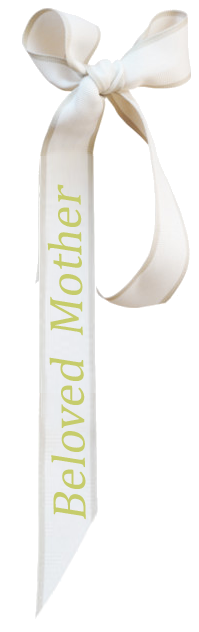
<style>
.page{position:relative;width:199px;height:632px;background:#ffffff}
.page>*{position:absolute;margin:0}
.t1{font:47.8px "CambriaMath";color:#c6cc6b;font-style:italic}
</style>
<div class="page">
<p class="t1" style="left:47px;top:184px;width:39px;height:336px;rotate:-91deg">Beloved  Mother</p>
</div>
